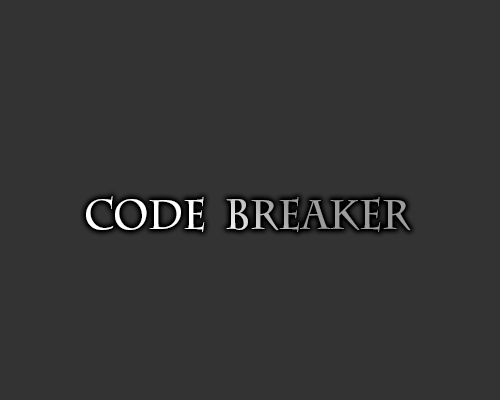
<style>
.page{position:relative;width:500px;height:400px;background:#333333}
.page>*{position:absolute;margin:0}
.t1{font:41.7px "CharlemagneStd-Bold";scale:0.9 1}
</style>
<div class="page">
<p class="t1" style="left:86px;top:196px;width:325px;height:36px">Code  breaker</p>
</div>
